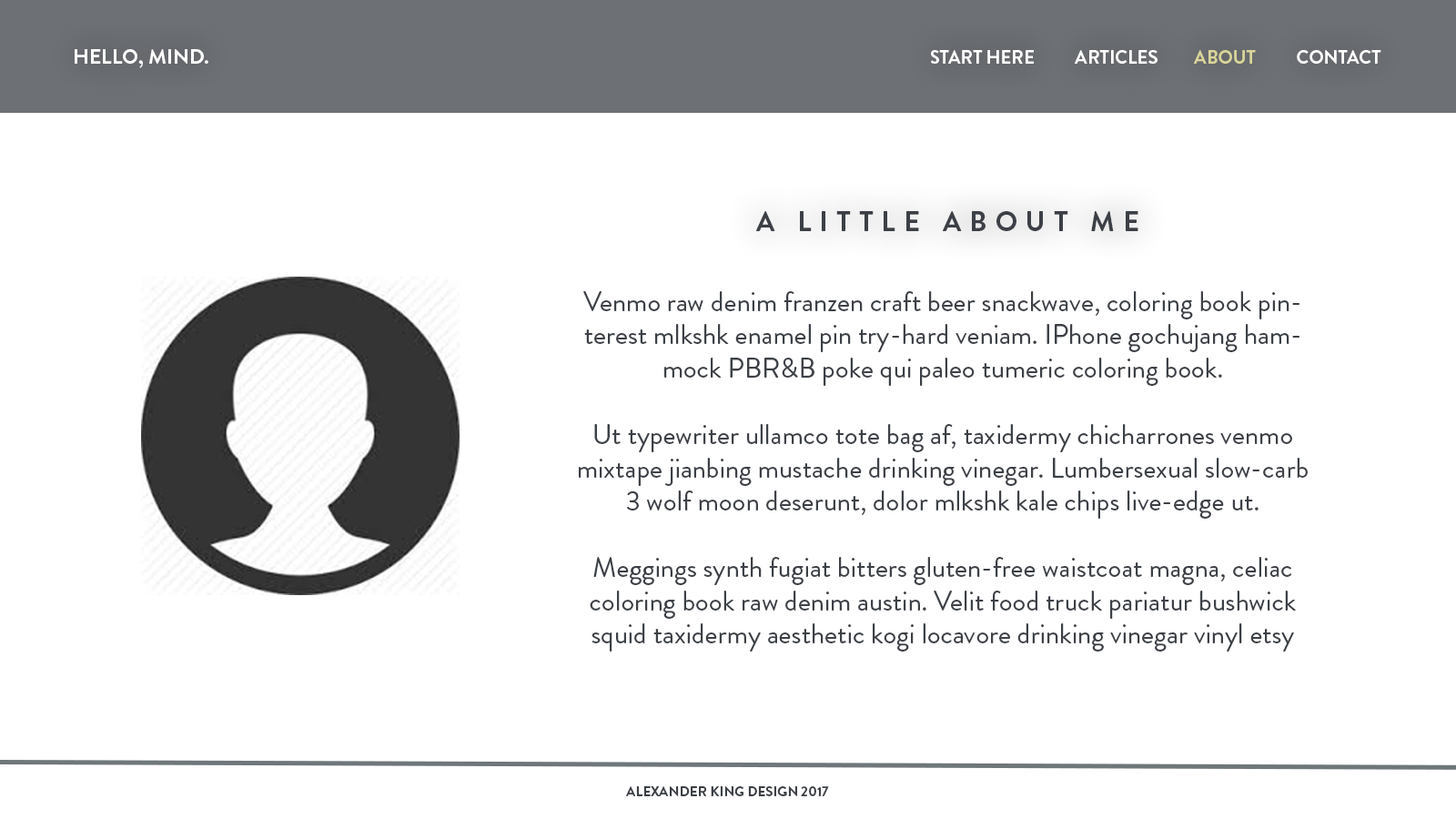
<style>
.page{position:relative;width:1456px;height:819px;background:#ffffff}
.page>*{position:absolute;margin:0}
.t1{font:20.8px "BrandonGrotesque-Bold";color:#ffffff;text-transform:uppercase}
.t2{font:18.5px "BrandonGrotesque-Bold";color:#ffffff;text-transform:uppercase}
.t3{font:18.5px "BrandonGrotesque-Bold";color:#d9d599;text-transform:uppercase}
.t4{font:27.7px "BrandonGrotesque-Bold";letter-spacing:0.3em;color:#3c4046;text-transform:uppercase}
.t5{font:27.7px "BrandonGrotesque-Regular";color:#3c4046}
</style>
<div class="page">
<p class="t1" style="left:75px;top:49px;width:133px;height:19px">Hello, Mind.</p>
<p class="t2" style="left:931px;top:50px;width:103px;height:14px">Start herE</p>
<p class="t2" style="left:1075px;top:50px;width:306px;height:14px">Articles         <span class="t3">about</span>          contact</p>
<p class="t4" style="left:756px;top:211px;width:382px;height:20px">A Little About me</p>
<p class="t5" style="left:579px;top:291px;width:729px;height:361px;text-align:center">Venmo raw denim franzen craft beer snackwave, coloring book pinterest mlkshk enamel pin try-hard veniam. IPhone gochujang hammock PBR&amp;B poke qui paleo tumeric coloring book. <br><br>Ut typewriter ullamco tote bag af, taxidermy chicharrones venmo mixtape jianbing mustache drinking vinegar. Lumbersexual slow-carb 3 wolf moon deserunt, dolor mlkshk kale chips live-edge ut. <br><br>Meggings synth fugiat bitters gluten-free waistcoat magna, celiac coloring book raw denim austin. Velit food truck pariatur bushwick squid taxidermy aesthetic kogi locavore drinking vinegar vinyl etsy gentrify pickled.</p>
</div>
